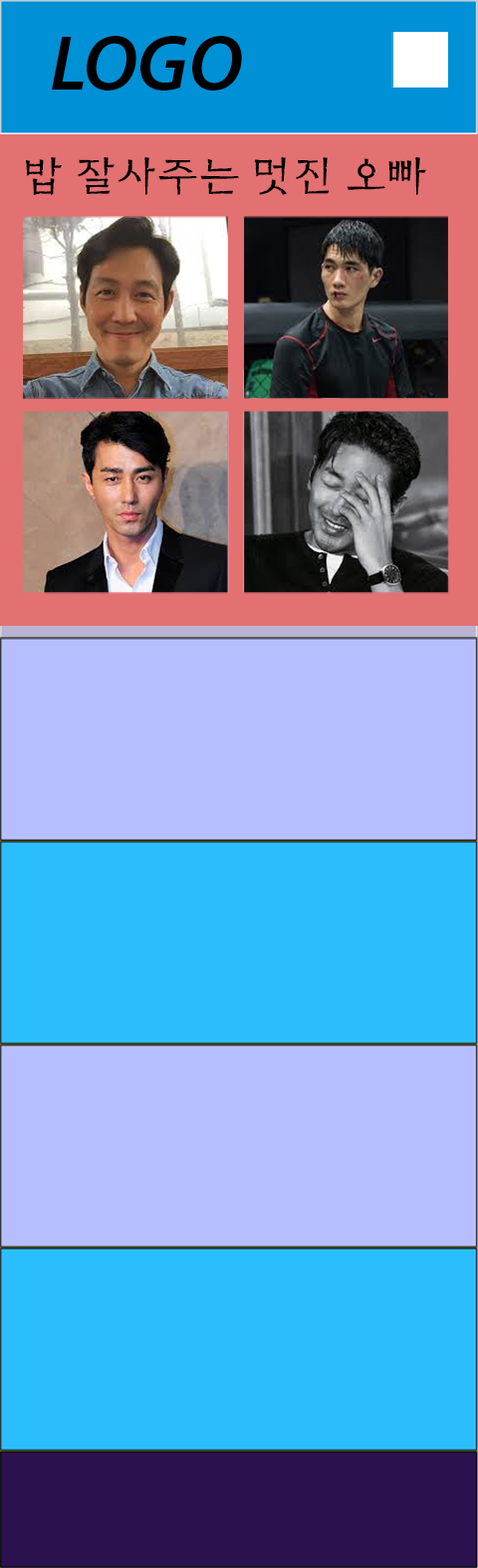
<style>
.page{position:relative;width:478px;height:1568px;background:#b7beff}
.page>*{position:absolute;margin:0}
.t1{font:78.7px "MyriadPro-SemiboldIt";color:#000000;text-transform:uppercase}
.t2{font:40.6px "YJ-BONMOKGAK-Medium";color:#000000;text-transform:uppercase}
</style>
<div class="page">
<p class="t1" style="left:52px;top:36px;width:190px;height:55px">logo</p>
<p class="t2" style="left:26px;top:157px;width:400px;height:39px">밥 잘사주는 멋진 오빠</p>
</div>
